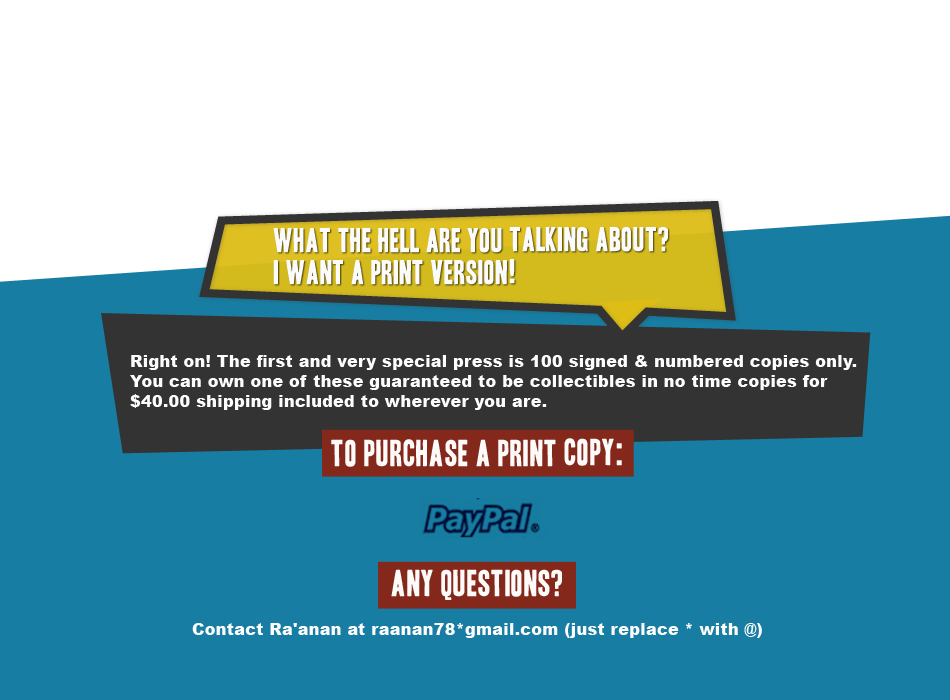
<style>
.page{position:relative;width:950px;height:700px;background:#177da2}
.page>*{position:absolute;margin:0}
.t1{font:29.8px/32px "HeadlineOneHPLHS";letter-spacing:0.02em;color:#fbfbfb}
.t2{font:16px/20px "Arial-Black";letter-spacing:0.02em;color:#fffcfc}
.t3{font:32.6px "HeadlineOneHPLHS";letter-spacing:0.025em;color:#fdfafa}
.t4{font:16px "Arial-Black";letter-spacing:0.02em;color:#fdfcfc}
</style>
<div class="page">
<p class="t1" style="left:273px;top:227px;width:395px;height:58px">What the hell are you talking about? <br>I want a print version!</p>
<p class="t2" style="left:130px;top:355px;width:727px;height:55px">Right on! The first and very special press is 100 signed &amp; numbered copies only. <br>You can own one of these guaranteed to be collectibles in no time copies for <br>$40.00 shipping included to wherever you are.</p>
<p class="t3" style="left:331px;top:438px;width:291px;height:29px">To purchase a print copy:</p>
<p class="t3" style="left:391px;top:569px;width:171px;height:31px">any questions?</p>
<p class="t4" style="left:192px;top:623px;width:570px;height:15px">Contact Ra'anan at raanan78*gmail.com (just replace * with @)</p>
</div>
